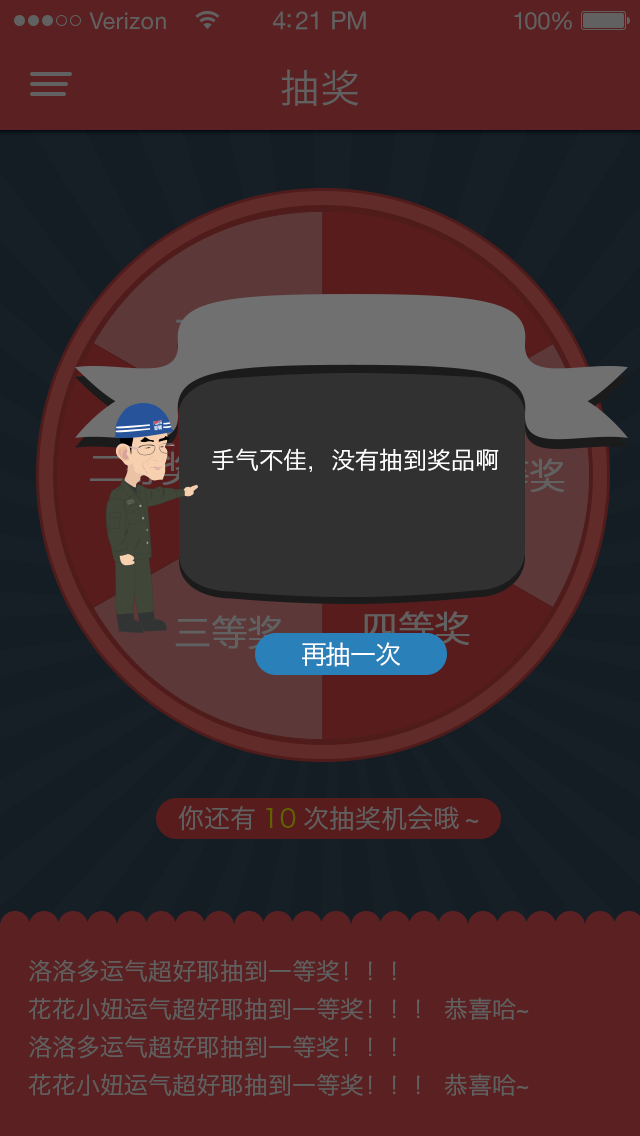
<style>
.page{position:relative;width:640px;height:1136px;background:#5b2122}
.page>*{position:absolute;margin:0}
.t1{font:23px "HelveticaNeueLTStd-Roman";letter-spacing:0.02em;color:#616161}
.t2{font:25px "HelveticaNeueLTStd-Roman";letter-spacing:-0.02em;color:#616161}
.t3{font:24px "HelveticaNeueLTStd-Roman";letter-spacing:-0.02em;color:#616161}
.t4{font:40px "HiraginoSansGB-W3";color:#616161}
.t5{font:24px "HiraginoSansGB-W3";color:#ffffff}
.t6{font:36px "FZLTXHK";color:#616161;font-weight:bold}
.t7{font:26px "HiraginoSansGB-W3";letter-spacing:-0.05em;color:#ffffff}
.t8{font:26px "HiraginoSansGB-W3";color:#616161}
.t9{font:24px/38px "HiraginoSansGB-W3";color:#606060}
</style>
<div class="page">
<p class="t1" style="left:89px;top:12px;width:77px;height:18px">Verizon</p>
<p class="t2" style="left:273px;top:11px;width:93px;height:19px">4:21 PM</p>
<p class="t3" style="left:514px;top:11px;width:58px;height:19px">100%</p>
<p class="t4" style="left:281px;top:69px;width:77px;height:37px">抽奖</p>
<p class="t5" style="left:212px;top:448px;width:287px;height:24px">手气不佳，没有抽到奖品啊</p>
<p class="t6" style="left:175px;top:615px;width:108px;height:34px">三等奖</p>
<p class="t6" style="left:364px;top:611px;width:106px;height:34px">四等奖</p>
<p class="t7" style="left:302px;top:642px;width:98px;height:25px">再抽一次</p>
<p class="t8" style="left:178px;top:805px;width:301px;height:26px">你还有10次抽奖机会哦~</p>
<p class="t9" style="left:28px;top:959px;width:501px;height:138px">洛洛多运气超好耶抽到一等奖！！！<br>花花小妞运气超好耶抽到一等奖！！！ 恭喜哈~<br>洛洛多运气超好耶抽到一等奖！！！<br>花花小妞运气超好耶抽到一等奖！！！ 恭喜哈~</p>
</div>
